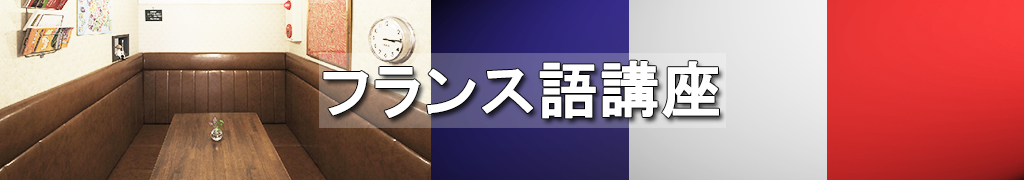
<style>
.page{position:relative;width:1024px;height:180px}
.page>*{position:absolute;margin:0}
.t1{font:60px "HGPGothicE";color:#ffffff;font-weight:bold}
</style>
<div class="page">
<p class="t1" style="left:323px;top:60px;width:396px;height:59px">フランス語講座</p>
</div>
